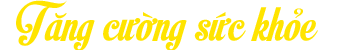
<style>
.page{position:relative;width:342px;height:50px;background:#ffffff}
.page>*{position:absolute;margin:0}
.t1{font:55.3px "SVN-MotionPicture";color:#ffe400}
</style>
<div class="page">
<p class="t1" style="left:16px;top:0px;width:302px;height:51px">Tăng cường sức khỏe</p>
</div>
